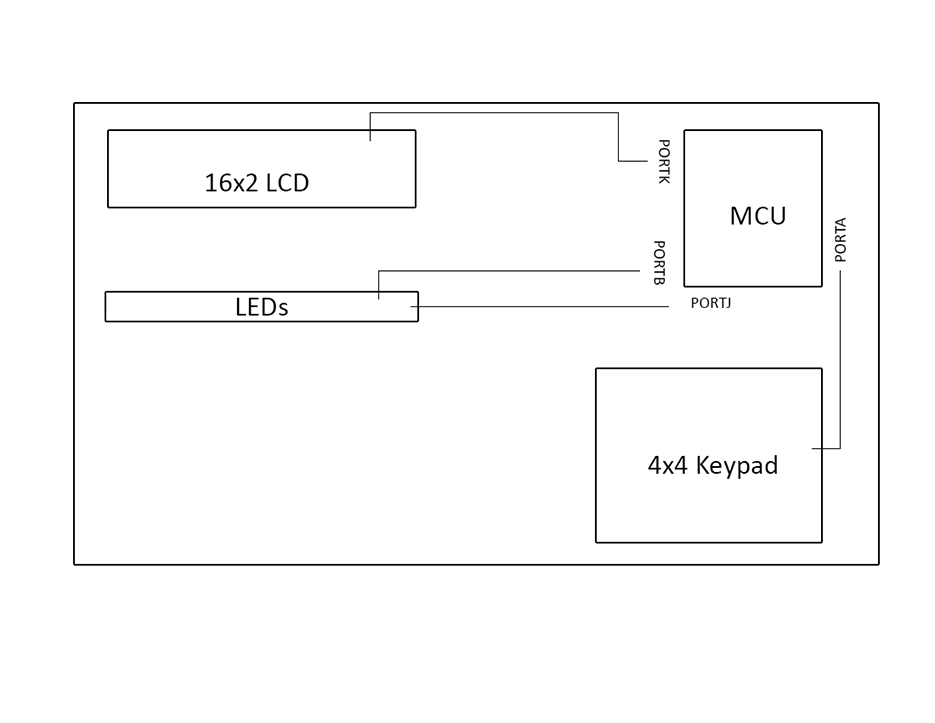
<style>
.page{position:relative;width:935px;height:723px;background:#ffffff}
.page>*{position:absolute;margin:0}
.t1{font:16.5px "Calibri"}
.t2{font:28.4px "Calibri"}
.t3{font:28.4px "Calibri";color:#000000}
.t4{font:16.5px "Calibri";color:#1a1a1a}
</style>
<div class="page">
<p class="t1" style="left:658px;top:140px;width:12px;height:44px;rotate:90deg">PORTK</p>
<p class="t2" style="left:206px;top:173px;width:103px;height:19px">16x2 LCD</p>
<p class="t3" style="left:731px;top:206px;width:54px;height:19px">MCU</p>
<p class="t1" style="left:834px;top:218px;width:12px;height:44px;rotate:-90deg">PORTA</p>
<p class="t1" style="left:653px;top:241px;width:12px;height:44px;rotate:90deg">PORTB</p>
<p class="t3" style="left:236px;top:298px;width:52px;height:19px">LEDs</p>
<p class="t4" style="left:691px;top:297px;width:40px;height:12px">PORTJ</p>
<p class="t3" style="left:648px;top:454px;width:130px;height:25px">4x4 Keypad</p>
</div>
